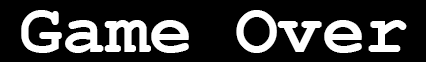
<style>
.page{position:relative;width:426px;height:62px;background:#000000}
.page>*{position:absolute;margin:0}
.t1{font:72px "CourierNewPS-BoldMT";color:#ffffff}
</style>
<div class="page">
<p class="t1" style="left:21px;top:10px;width:386px;height:43px">Game Over</p>
</div>
